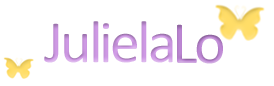
<style>
.page{position:relative;width:274px;height:86px;background:#ffffff}
.page>*{position:absolute;margin:0}
.t1{font:60px "Calibri";letter-spacing:-0.05em;color:#cf99e5}
.t2{font:60px "Calibri";letter-spacing:-0.05em;color:#bd86d4}
</style>
<div class="page">
<p class="t1" style="left:44px;top:21px;width:129px;height:42px">Juliela</p>
<p class="t2" style="left:177px;top:24px;width:46px;height:40px">Lo</p>
</div>
